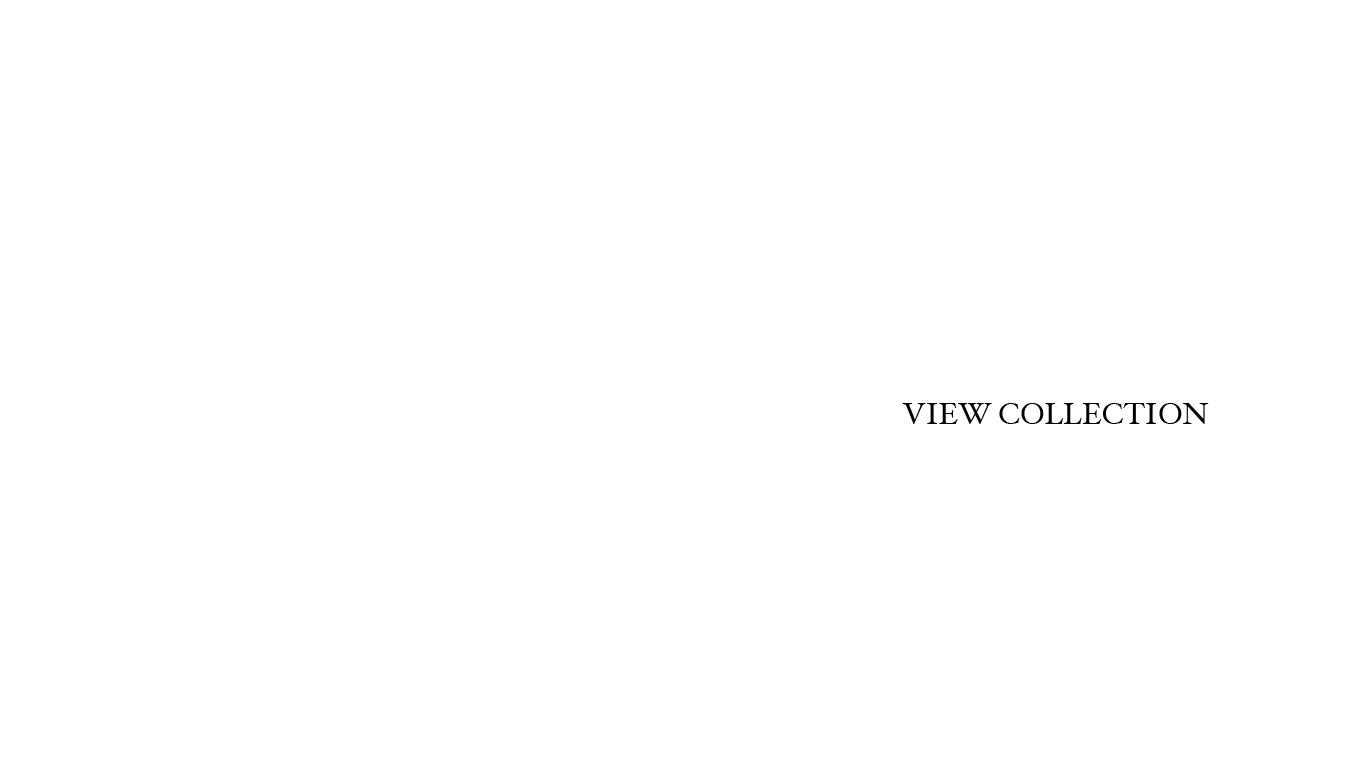
<style>
.page{position:relative;width:1366px;height:768px;background:#ffffff}
.page>*{position:absolute;margin:0}
.t1{font:30px "HoeflerText-Regular";color:#000000}
</style>
<div class="page">
<p class="t1" style="left:902px;top:403px;width:307px;height:21px">VIEW COLLECTION</p>
</div>
